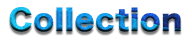
<style>
.page{position:relative;width:192px;height:44px;background:#ffffff}
.page>*{position:absolute;margin:0}
.t1{font:28.2px "HiraKakuStd-W8";letter-spacing:0.04em}
</style>
<div class="page">
<p class="t1" style="left:9px;top:7px;width:172px;height:25px">Collection</p>
</div>
